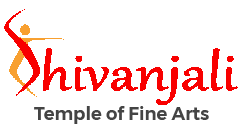
<style>
.page{position:relative;width:248px;height:133px;background:#ffffff}
.page>*{position:absolute;margin:0}
.t1{font:18px "Montserrat-SemiBold";color:#444444}
</style>
<div class="page">
<p class="t1" style="left:34px;top:106px;width:175px;height:18px">Temple of Fine Arts</p>
</div>
